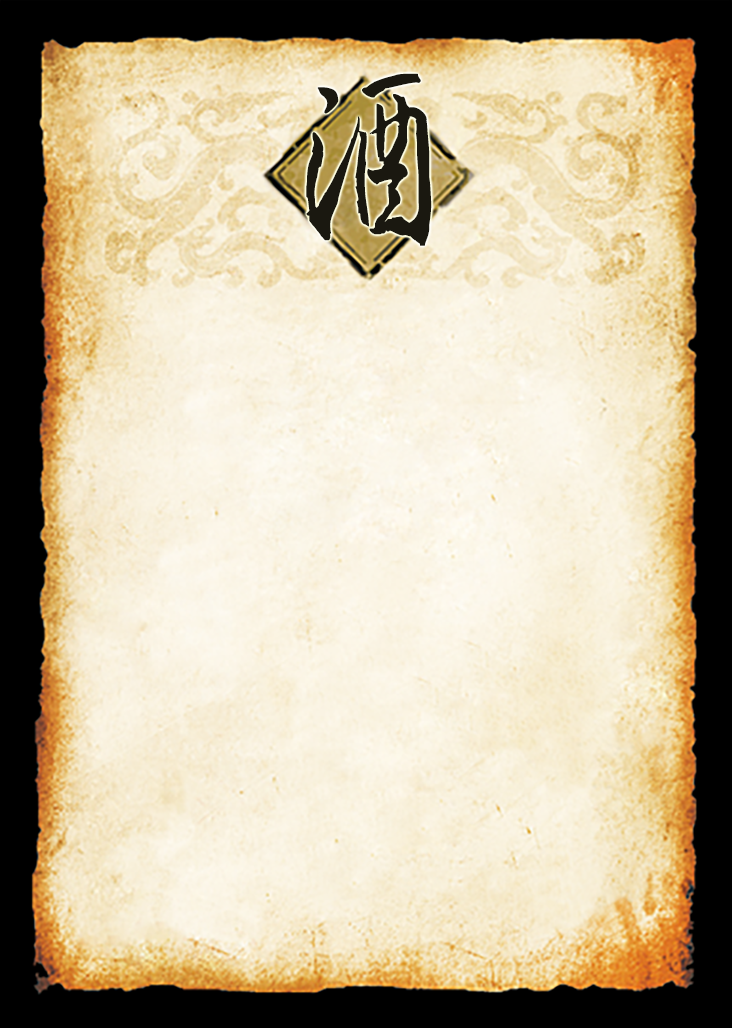
<style>
.page{position:relative;width:732px;height:1028px}
.page>*{position:absolute;margin:0}
.t1{font:183.3px "JMMCX_GBK";color:#1b1911;font-weight:bold}
</style>
<div class="page">
<p class="t1" style="left:306px;top:73px;width:126px;height:173px">酒</p>
</div>
